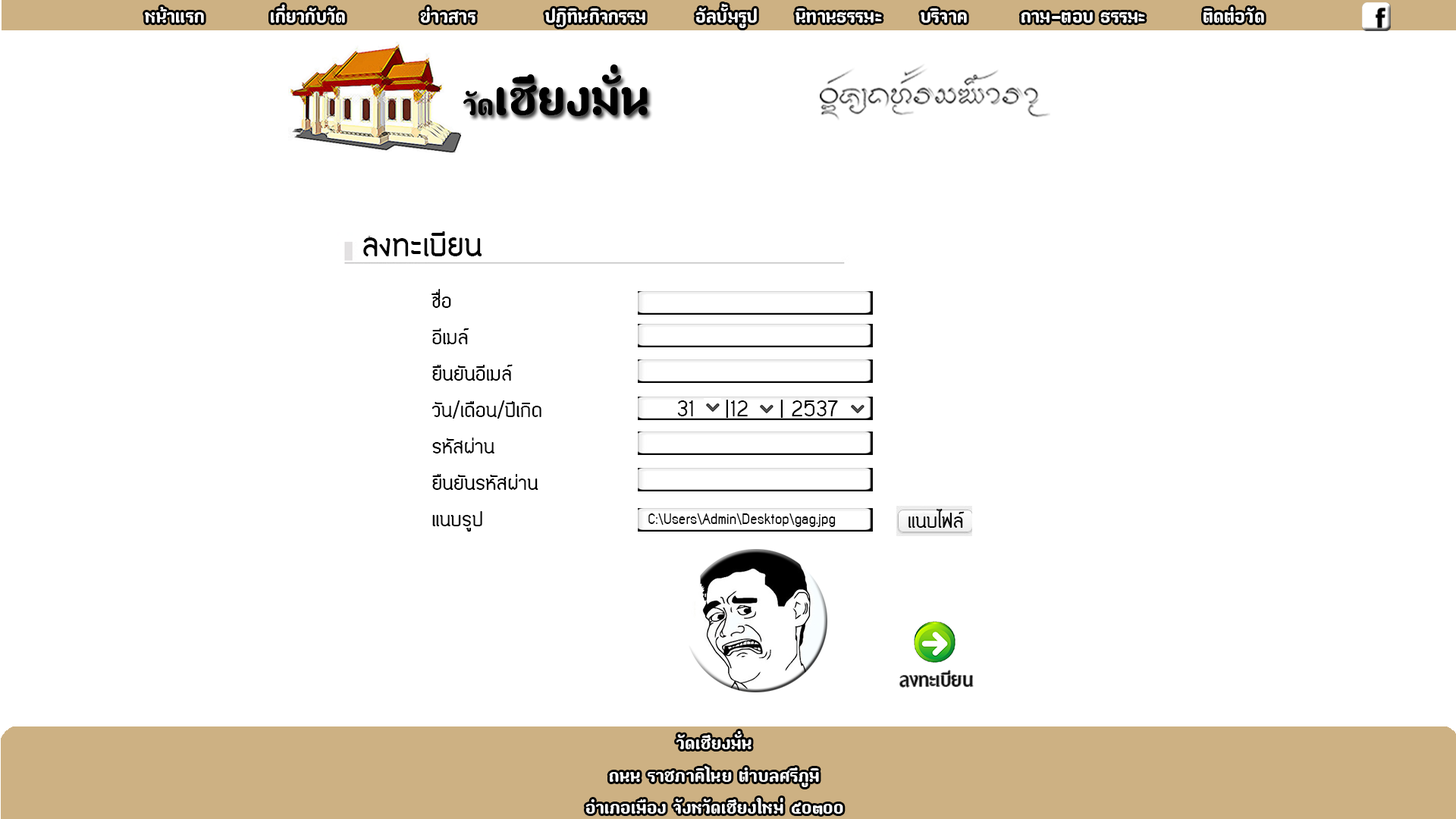
<style>
.page{position:relative;width:1456px;height:819px;background:#ffffff}
.page>*{position:absolute;margin:0}
.t1{font:27.3px "paaymaay";color:#f9f9f9}
.t2{font:73.6px "paaymaay";color:#000000}
.t3{font:44.2px "paaymaay";color:#000000}
.t4{font:36.4px "EDPenSook-NormalToneBold";color:#020202}
.t5{font:22.7px/36.4px "EDPenSook-NormalToneBold";color:#020202}
.t6{font:22.7px "EDPenSook-NormalToneBold";color:#020202}
.t7{font:15.2px "EDPenSook-NormalToneBold";color:#020202}
.t8{font:27.3px "PGVIM";color:#020202}
.t9{font:26.9px "paaymaay";color:#fdfdfc}
</style>
<div class="page">
<p class="t1" style="left:145px;top:4px;width:1119px;height:24px">หน้าแรก    เกี่ยวกับวัด    ข่าวสาร    ปฏิทินกิจกรรม   อัลบั้มรูป  นิทานธรรมะ  บริจาค   ถาม-ตอบ ธรรมะ    ติดต่อวัด</p>
<p class="t2" style="left:463px;top:64px;width:185px;height:52px"><span class="t3">วัด</span>เชียงมั่น</p>
<p class="t4" style="left:363px;top:231px;width:119px;height:25px">ลงทะเบียน</p>
<p class="t5" style="left:431px;top:289px;width:110px;height:243px;text-align:right">ชื่อ<br>อีเมล์<br>ยืนยันอีเมล์<br>วัน/เดือน/ปีเกิด<br>รหัสผ่าน<br>ยืนยันรหัสผ่าน<br>แนบรูป</p>
<p class="t6" style="left:677px;top:400px;width:161px;height:18px">2537 |  12 |  31</p>
<p class="t6" style="left:908px;top:509px;width:57px;height:19px">แนบไฟล์</p>
<p class="t7" style="left:648px;top:513px;width:188px;height:14px">C:\Users\Admin\Desktop\gag.jpg</p>
<p class="t8" style="left:900px;top:670px;width:73px;height:17px">ลงทะเบียน</p>
<p class="t9" style="left:585px;top:731px;width:258px;height:83px;text-align:center">วัดเชียงมั่น<br>ถนน ราชภาคิไนย ตำบลศรีภูมิ<br>อำเภอเมือง จังหวัดเชียงใหม่ ๕o๓oo</p>
</div>
